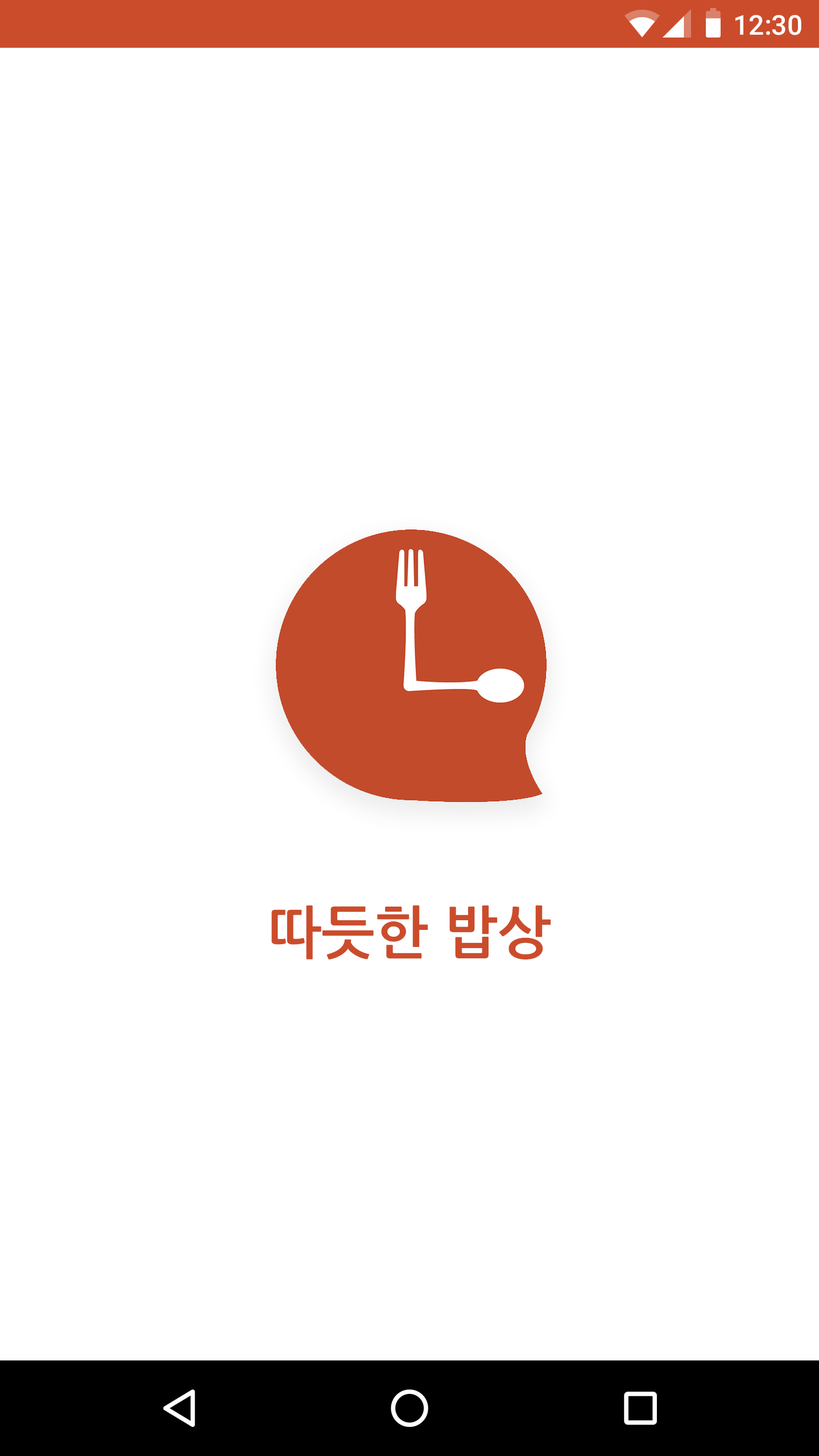
<style>
.page{position:relative;width:819px;height:1456px;background:#ffffff}
.page>*{position:absolute;margin:0}
.t1{font:27.3px "Roboto-Medium";color:#ffffff}
.t2{font:56.8px "NanumGothicBold";color:#cb4c2b}
</style>
<div class="page">
<p class="t1" style="left:735px;top:15px;width:66px;height:20px">12:30</p>
<p class="t2" style="left:271px;top:905px;width:280px;height:54px">따듯한 밥상</p>
</div>
